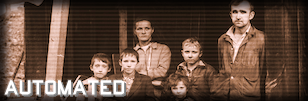
<style>
.page{position:relative;width:308px;height:101px}
.page>*{position:absolute;margin:0}
.t1{font:17.3px "ACES_MIL-STD-2161C";color:#ffffff}
</style>
<div class="page">
<p class="t1" style="left:4px;top:80px;width:120px;height:15px">automated</p>
</div>
